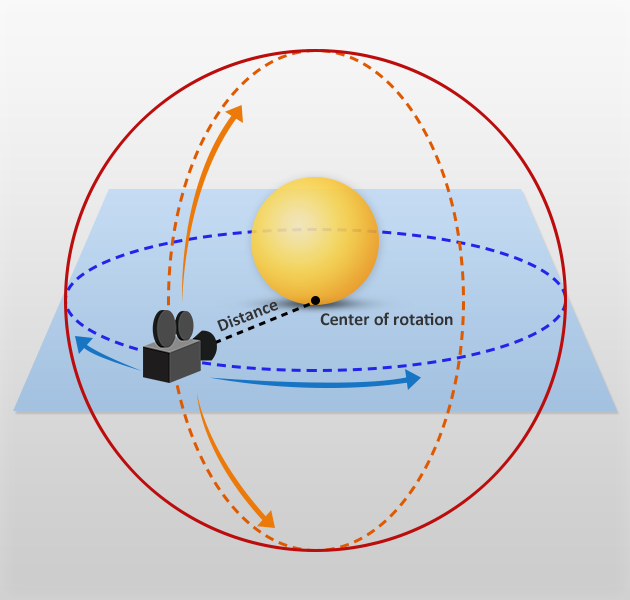
<style>
.page{position:relative;width:630px;height:600px}
.page>*{position:absolute;margin:0}
.t1{font:18px "Calibri-Bold";color:#333333}
</style>
<div class="page">
<p class="t1" style="left:217px;top:302px;width:62px;height:30px;rotate:-21deg">Distance</p>
<p class="t1" style="left:320px;top:312px;width:133px;height:14px">Center of rotation</p>
</div>
